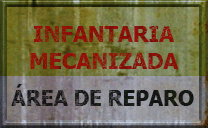
<style>
.page{position:relative;width:208px;height:128px}
.page>*{position:absolute;margin:0}
.t1{font:21.1px "Tahoma-Bold";color:#97110a;text-transform:uppercase;scale:1.03 1}
.t2{font:22px "Tahoma-Bold";letter-spacing:-0.02em;color:#101010;text-transform:uppercase;scale:0.97 1}
</style>
<div class="page">
<p class="t1" style="left:34px;top:26px;width:140px;height:16px">INFANTARIA</p>
<p class="t1" style="left:30px;top:53px;width:149px;height:16px">MECANIZADA</p>
<p class="t2" style="left:11px;top:84px;width:183px;height:22px">ÁREA DE REPARO</p>
</div>
